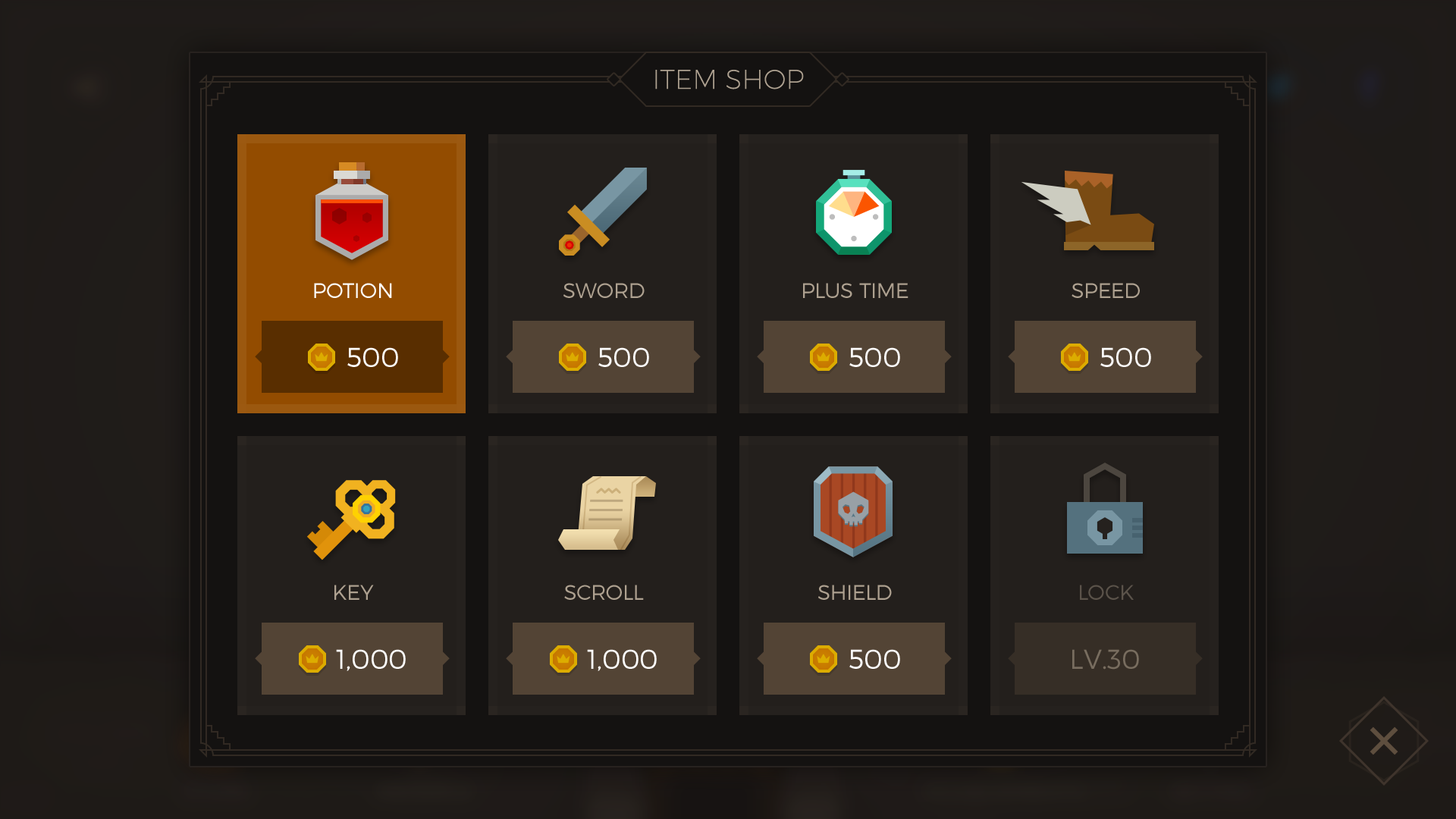
<style>
.page{position:relative;width:1456px;height:819px}
.page>*{position:absolute;margin:0}
.t1{font:27.2px "Montserrat-UltraLight";color:#aea190;text-transform:uppercase}
.t2{font:21.2px "Montserrat-Light";color:#ffffff;text-transform:uppercase}
.t3{font:21.2px "Montserrat-Light";color:#aea190;text-transform:uppercase}
.t4{font:27.3px "Montserrat-Light";color:#ffffff}
.t5{font:21.2px "Montserrat-Light";color:#5b534a;text-transform:uppercase}
.t6{font:27.3px "Montserrat-Light";color:#786d5f}
</style>
<div class="page">
<p class="t1" style="left:655px;top:70px;width:149px;height:19px">item shop</p>
<p class="t2" style="left:314px;top:283px;width:78px;height:15px">Potion</p>
<p class="t3" style="left:563px;top:283px;width:82px;height:15px">sword</p>
<p class="t3" style="left:803px;top:283px;width:105px;height:15px">plus time</p>
<p class="t3" style="left:1072px;top:283px;width:68px;height:15px">speed</p>
<p class="t4" style="left:347px;top:347px;width:51px;height:20px">500</p>
<p class="t4" style="left:598px;top:347px;width:51px;height:20px">500</p>
<p class="t4" style="left:849px;top:347px;width:51px;height:20px">500</p>
<p class="t4" style="left:1100px;top:347px;width:51px;height:20px">500</p>
<p class="t3" style="left:334px;top:585px;width:40px;height:15px">Key</p>
<p class="t3" style="left:564px;top:585px;width:80px;height:15px">scroll</p>
<p class="t3" style="left:818px;top:585px;width:74px;height:15px">shield</p>
<p class="t5" style="left:1080px;top:585px;width:54px;height:15px">LOCK</p>
<p class="t4" style="left:336px;top:649px;width:70px;height:22px">1,000</p>
<p class="t4" style="left:587px;top:649px;width:70px;height:22px">1,000</p>
<p class="t4" style="left:849px;top:649px;width:51px;height:20px">500</p>
<p class="t6" style="left:1072px;top:649px;width:67px;height:21px">LV.30</p>
</div>
